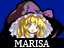
<style>
.page{position:relative;width:64px;height:48px;background:#000000}
.page>*{position:absolute;margin:0}
.t1{font:10px "Cambria";color:#ffffff}
</style>
<div class="page">
<p class="t1" style="left:14px;top:40px;width:36px;height:7px">MARISA</p>
</div>
